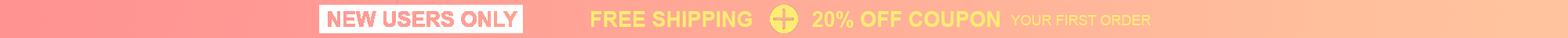
<style>
.page{position:relative;width:1568px;height:38px}
.page>*{position:absolute;margin:0}
.t1{font:21.2px "Arial-BoldMT";color:#ffed72}
.t2{font:14.1px "ArialMT";color:#ffed72}
</style>
<div class="page">
<p class="t1" style="left:591px;top:11px;width:409px;height:16px">FREE SHIPPING          20% OFF COUPON</p>
<p class="t2" style="left:1011px;top:15px;width:140px;height:10px">YOUR FIRST ORDER</p>
</div>
